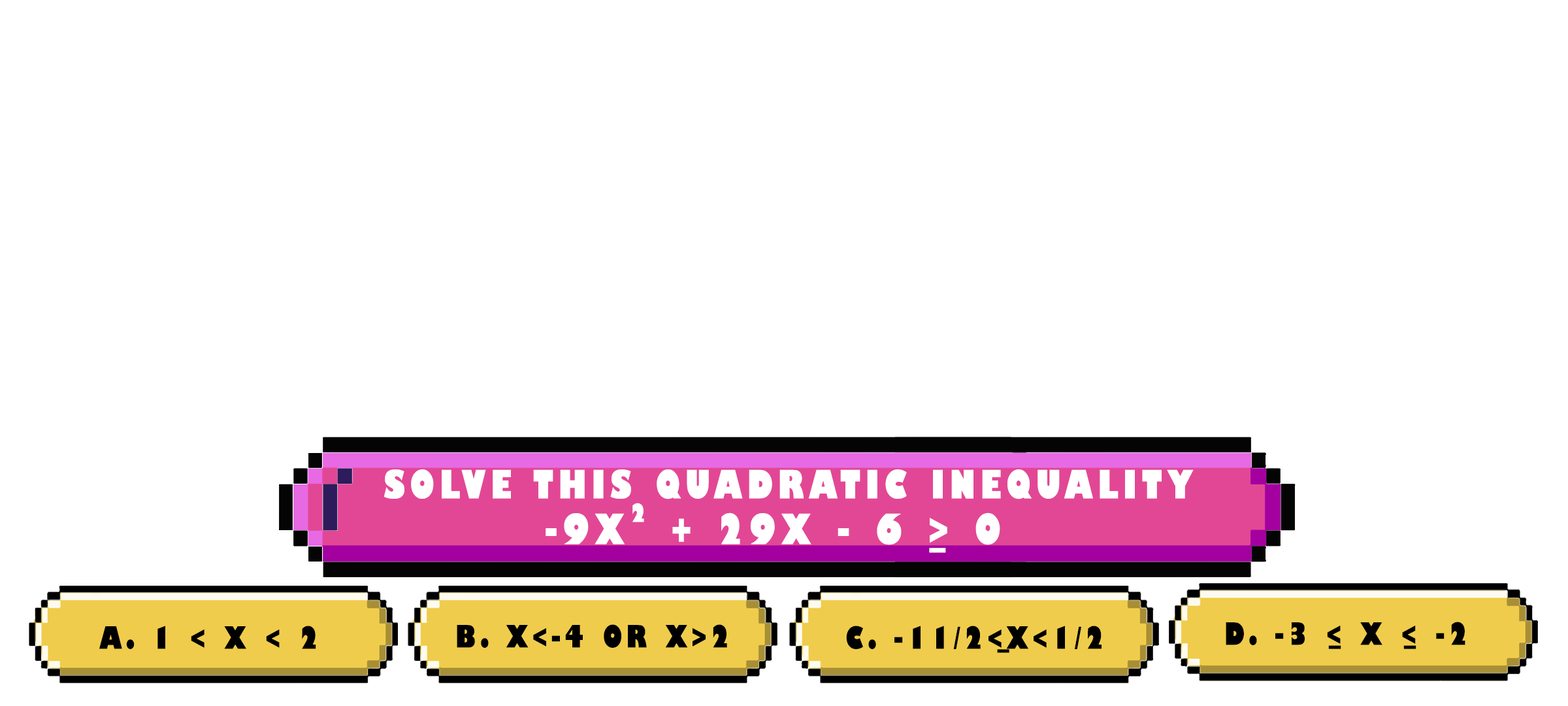
<style>
.page{position:relative;width:1568px;height:706px;background:#ffffff}
.page>*{position:absolute;margin:0}
.t1{font:38.1px "GillSans-UltraBoldCondensed";letter-spacing:0.115em;color:#ffffff;text-transform:uppercase;scale:1.12 1}
.t2{font:24.5px "GillSans-UltraBoldCondensed";letter-spacing:0.115em;color:#ffffff;text-transform:uppercase;scale:1.12 1}
.t3{font:40.8px "GillSans-UltraBoldCondensed";letter-spacing:0.115em;color:#ffffff;text-transform:uppercase;scale:1.12 1}
.t4{font:29.9px "GillSans-UltraBoldCondensed";letter-spacing:0.115em;color:#000000;text-transform:uppercase;scale:1.12 1}
</style>
<div class="page">
<p class="t1" style="left:384px;top:469px;width:810px;height:30px">solve this quadratic inequality</p>
<p class="t2" style="left:632px;top:502px;width:12px;height:20px">2</p>
<p class="t3" style="left:546px;top:512px;width:454px;height:33px">-9x  + 29x - 6 &gt; 0</p>
<p class="t3" style="left:929px;top:547px;width:17px;height:6px">_</p>
<p class="t4" style="left:99px;top:625px;width:217px;height:24px">a. 1 &lt; x &lt; 2</p>
<p class="t4" style="left:457px;top:624px;width:270px;height:23px">b. x&lt;-4 or x&gt;2</p>
<p class="t4" style="left:846px;top:625px;width:256px;height:24px">c. -11/2&lt;x&lt;1/2</p>
<p class="t4" style="left:1226px;top:621px;width:239px;height:24px">d. -3 &lt; x &lt; -2</p>
<p class="t4" style="left:997px;top:649px;width:12px;height:4px">_</p>
<p class="t4" style="left:1328px;top:645px;width:13px;height:4px">_</p>
<p class="t4" style="left:1403px;top:645px;width:13px;height:4px">_</p>
</div>
